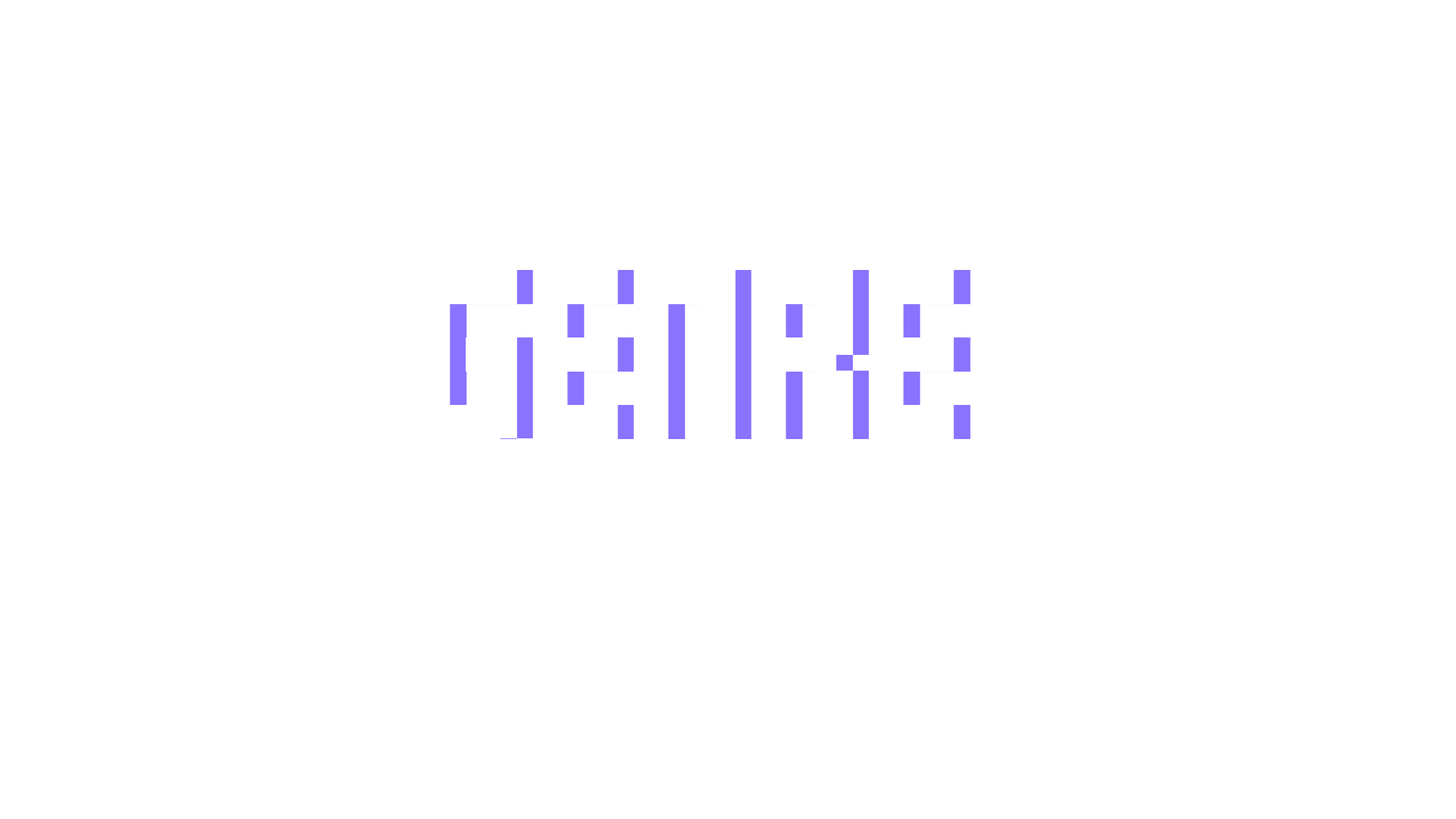
<style>
.page{position:relative;width:1456px;height:819px;background:#ffffff}
.page>*{position:absolute;margin:0}
.t1{font:134.2px "FFFForward";color:#ffffff}
.t2{font:134.2px "FFFForward"}
</style>
<div class="page">
<p class="t1" style="left:416px;top:270px;width:538px;height:169px">GENRE</p>
<p class="t2" style="left:432px;top:270px;width:539px;height:169px">GENRE</p>
</div>
